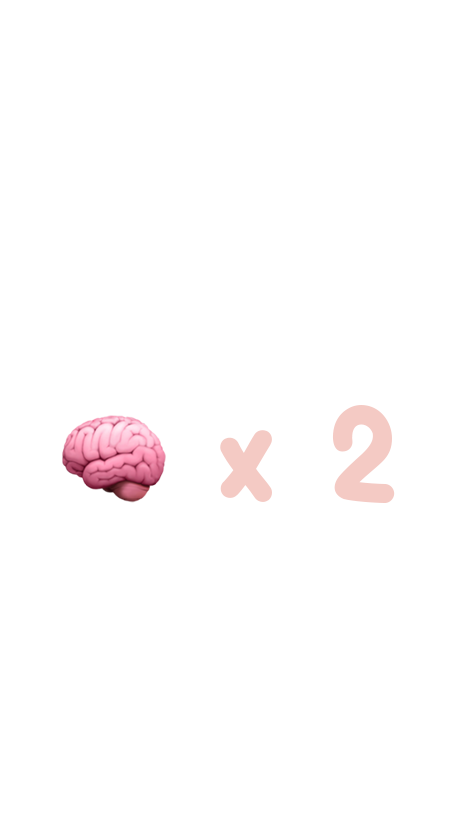
<style>
.page{position:relative;width:469px;height:833px;background:#ffffff}
.page>*{position:absolute;margin:0}
.t1{font:200px "FCDaisyBold";color:#f4cac4}
</style>
<div class="page">
<p class="t1" style="left:220px;top:405px;width:175px;height:98px">x 2</p>
</div>
